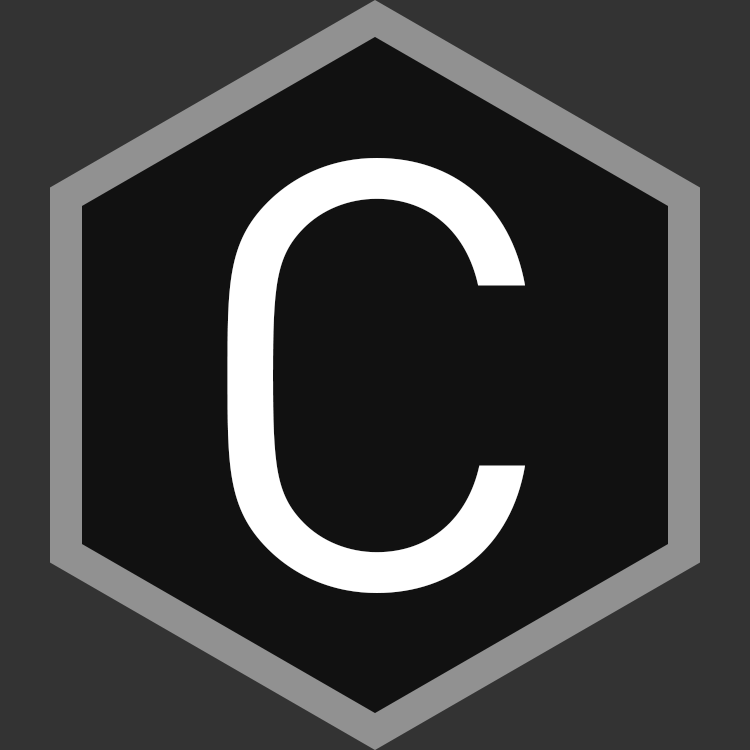
<style>
.page{position:relative;width:750px;height:750px;background:#111111}
.page>*{position:absolute;margin:0}
.t1{font:600px "DINPro-Regular";color:#ffffff}
</style>
<div class="page">
<p class="t1" style="left:227px;top:158px;width:298px;height:435px">C</p>
</div>
